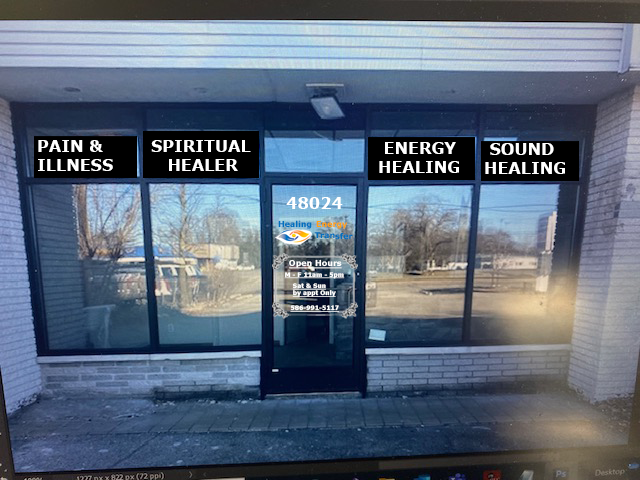
<style>
.page{position:relative;width:640px;height:480px}
.page>*{position:absolute;margin:0}
.t1{font:16px "Verdana-Bold";color:#ffffff}
.t2{font:8px "Verdana-Bold";color:#0070bf}
.t3{font:8px "Verdana-Bold";color:#ffa116}
.t4{font:8px "Verdana-Bold";color:#ffffff;text-decoration:underline}
.t5{font:6px "Verdana-Bold";color:#ffffff;text-decoration:underline}
</style>
<div class="page">
<p class="t1" style="left:38px;top:140px;width:75px;height:31px">PAIN &amp;<br>ILLNESS</p>
<p class="t1" style="left:151px;top:140px;width:100px;height:31px">SPIRITUAL<br>   HEALER</p>
<p class="t1" style="left:379px;top:142px;width:80px;height:31px">ENERGY<br>HEALING</p>
<p class="t1" style="left:485px;top:143px;width:80px;height:31px">SOUND <br>HEALING</p>
<p class="t1" style="left:286px;top:197px;width:57px;height:12px">48024</p>
<p class="t2" style="left:278px;top:220px;width:34px;height:9px">Healing</p>
<p class="t3" style="left:316px;top:220px;width:32px;height:9px">Energy</p>
<p class="t2" style="left:314px;top:232px;width:39px;height:8px;rotate:1deg">Transfer</p>
<p class="t4" style="left:288px;top:259px;width:54px;height:10px">Open Hours</p>
<p class="t5" style="left:284px;top:272px;width:61px;height:7px">M - F 11am - 5pm</p>
<p class="t5" style="left:292px;top:283px;width:44px;height:14px">Sat &amp; Sun<br>by appt Only</p>
<p class="t5" style="left:290px;top:305px;width:49px;height:7px">586-991-5117</p>
</div>
